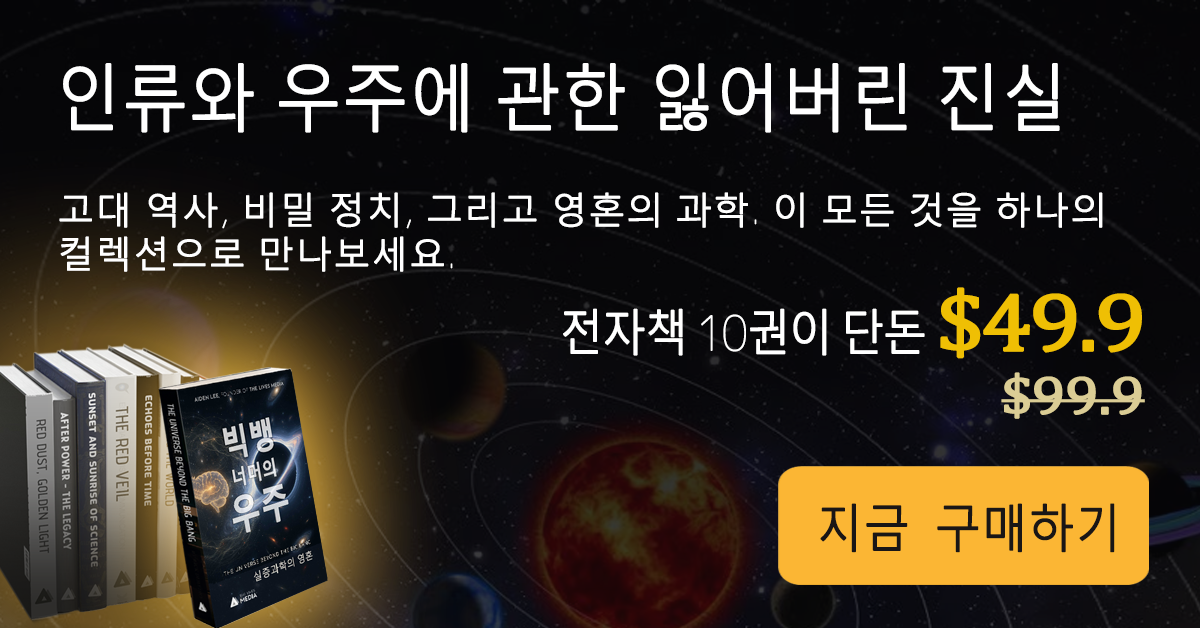
<style>
.page{position:relative;width:1200px;height:628px}
.page>*{position:absolute;margin:0}
.t1{font:71.5px "MalgunGothic-Semilight";letter-spacing:0.005em;color:#ffffff;font-weight:bold;scale:0.91 1}
.t2{font:36px/44px "MalgunGothic-Semilight";letter-spacing:0.025em;color:#ffffff;font-weight:bold}
.t3{font:36px/44px "Chogokuboso-Gothic";letter-spacing:0.025em;color:#ffffff;font-weight:bold}
.t4{font:48px "MalgunGothic-Semilight";letter-spacing:-0.05em;color:#ffffff;font-weight:bold;scale:0.9 1}
.t5{font:48px "Chogokuboso-Gothic";letter-spacing:-0.05em;color:#ffffff;font-weight:bold;scale:0.9 1}
.t6{font:82.8px "Cambria";letter-spacing:-0.05em;color:#efbf04;font-weight:bold;scale:1.11 1}
.t7{font:54px "Cambria";letter-spacing:-0.025em;color:#dbcd95;font-weight:bold;scale:1.11 1}
.t8{font:50.3px "MalgunGothic-Semilight";letter-spacing:0.005em;color:#191616;font-weight:bold;scale:0.9 1}
</style>
<div class="page">
<p class="t1" style="left:63px;top:63px;width:997px;height:70px">인류와 우주에 관한 잃어버린 진실</p>
<p class="t2" style="left:59px;top:192px;width:1044px;height:80px">고대 역사<span class="t3">, </span>비밀 정치<span class="t3">, </span>그리고 영혼의 과학<span class="t3">. </span>이 모든 것을 하나의 컬렉션으로 만나보세요<span class="t3">.</span></p>
<p class="t4" style="left:563px;top:287px;width:579px;height:72px">전자책<span class="t5"> 10</span>권이 단돈 <span class="t6">$49.9</span></p>
<p class="t7" style="left:1001px;top:372px;width:144px;height:47px">$99.9</p>
<p class="t8" style="left:820px;top:503px;width:295px;height:50px">지금 구매하기</p>
</div>
